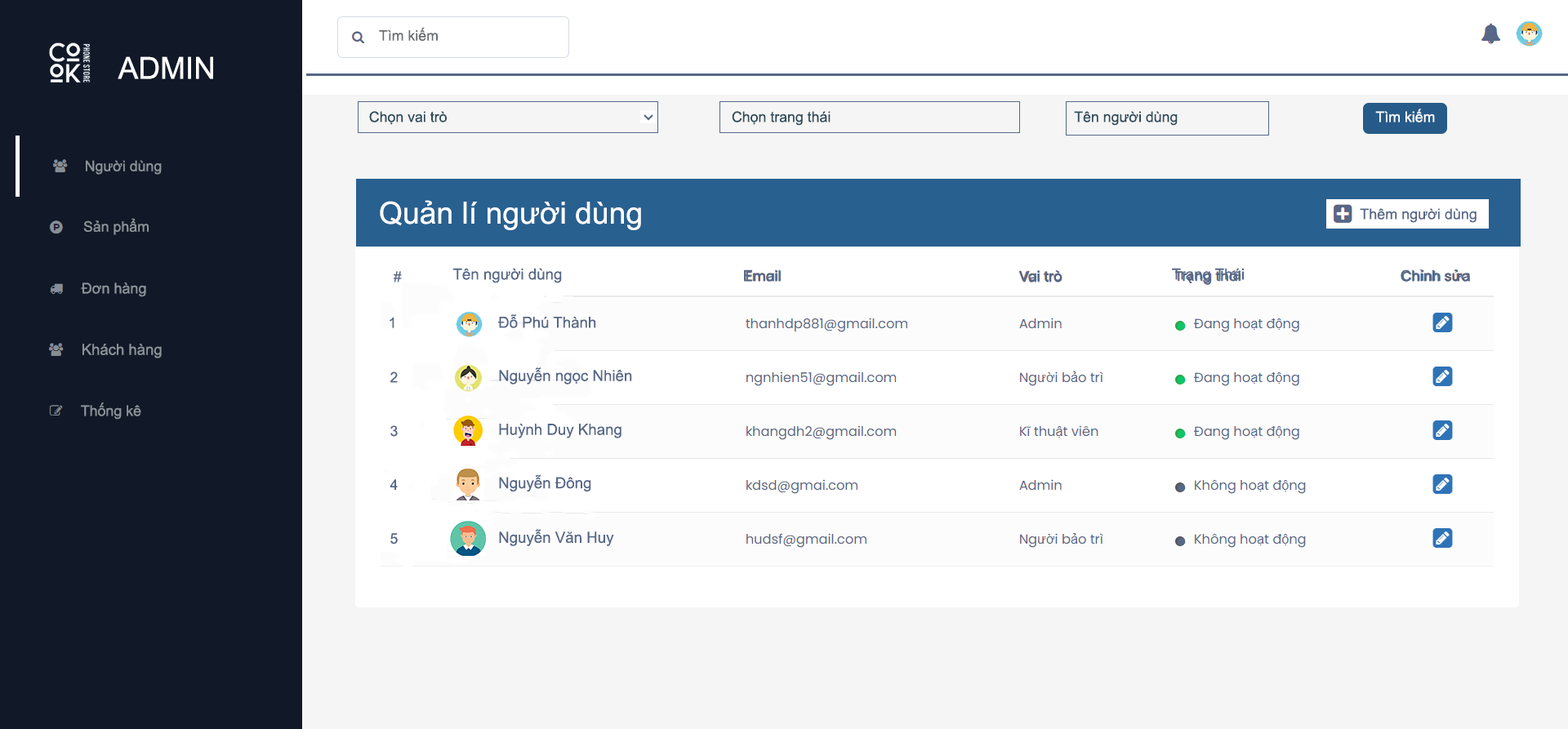
<style>
.page{position:relative;width:1568px;height:729px;background:#ffffff}
.page>*{position:absolute;margin:0}
.t1{font:14.5px "ArialMT";color:#686e71}
.t2{font:30.3px "ArialMT";color:#ffffff}
.t3{font:14.5px "ArialMT";color:#2e4b5b}
.t4{font:14.5px "ArialMT";color:#ffffff}
.t5{font:14.5px "ArialMT";color:#8c9499}
.t6{font:30.5px "ArialMT";color:#ffffff}
.t7{font:14.7px "ArialMT";color:#566787}
.t8{font:15.3px "ArialMT";color:#566787}
.t9{font:14.3px "ArialMT";color:#566787}
.t10{font:14.7px "ArialMT";color:#8c9499}
.t11{font:15.1px "ArialMT";color:#8c9499}
</style>
<div class="page">
<p class="t1" style="left:379px;top:27px;width:59px;height:14px">Tìm kiếm</p>
<p class="t2" style="left:118px;top:56px;width:95px;height:23px">ADMIN</p>
<p class="t3" style="left:369px;top:111px;width:78px;height:14px">Chọn vai trò</p>
<p class="t3" style="left:732px;top:111px;width:99px;height:15px">Chọn trang thái</p>
<p class="t3" style="left:1074px;top:111px;width:104px;height:15px">Tên người dùng</p>
<p class="t4" style="left:1375px;top:109px;width:60px;height:13px">Tìm kiếm</p>
<p class="t5" style="left:86px;top:160px;width:76px;height:15px">Người dùng</p>
<p class="t6" style="left:380px;top:200px;width:261px;height:30px">Quản lí người dùng</p>
<p class="t7" style="left:1360px;top:208px;width:117px;height:15px">Thêm người dùng</p>
<p class="t5" style="left:83px;top:218px;width:66px;height:17px">Sản phẩm</p>
<p class="t8" style="left:452px;top:268px;width:110px;height:15px">Tên người dùng</p>
<p class="t8" style="left:744px;top:270px;width:37px;height:12px">Email</p>
<p class="t8" style="left:1172px;top:268px;width:72px;height:15px">Trạng Thái</p>
<p class="t8" style="left:1401px;top:270px;width:70px;height:12px">Chỉnh sửa</p>
<p class="t9" style="left:394px;top:271px;width:8px;height:12px">#</p>
<p class="t8" style="left:1019px;top:270px;width:43px;height:13px">Vai trò</p>
<p class="t10" style="left:81px;top:283px;width:65px;height:14px">Đơn hàng</p>
<p class="t9" style="left:390px;top:317px;width:4px;height:11px">1</p>
<p class="t8" style="left:498px;top:314px;width:98px;height:14px">Đỗ Phú Thành</p>
<p class="t11" style="left:82px;top:344px;width:80px;height:15px">Khách hàng</p>
<p class="t9" style="left:390px;top:372px;width:8px;height:11px">2</p>
<p class="t8" style="left:499px;top:368px;width:133px;height:17px">Nguyễn ngọc Nhiên</p>
<p class="t5" style="left:81px;top:403px;width:60px;height:17px">Thống kê</p>
<p class="t9" style="left:390px;top:425px;width:8px;height:12px">3</p>
<p class="t8" style="left:499px;top:424px;width:122px;height:15px">Huỳnh Duy Khang</p>
<p class="t9" style="left:390px;top:479px;width:8px;height:11px">4</p>
<p class="t8" style="left:499px;top:474px;width:92px;height:18px">Nguyễn Đông</p>
<p class="t9" style="left:390px;top:533px;width:8px;height:12px">5</p>
<p class="t8" style="left:499px;top:529px;width:115px;height:17px">Nguyễn Văn Huy</p>
</div>
